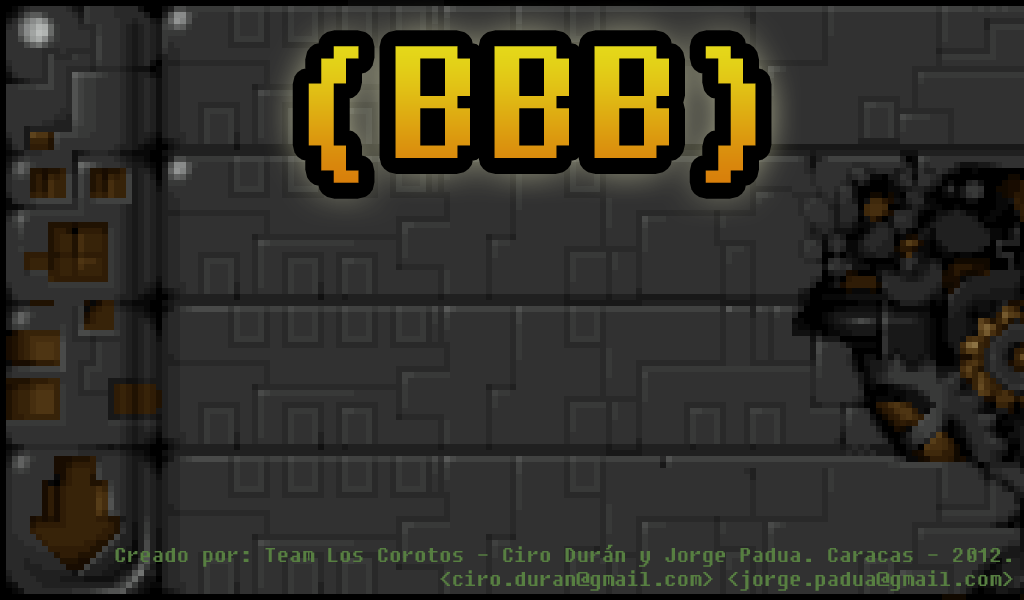
<style>
.page{position:relative;width:1024px;height:600px;background:#313131}
.page>*{position:absolute;margin:0}
.t1{font:159px "Fixedsys"}
.t2{font:20px "Fixedsys";color:#577f41}
</style>
<div class="page">
<p class="t1" style="left:308px;top:46px;width:448px;height:137px">(BBB)</p>
<p class="t2" style="left:115px;top:544px;width:898px;height:47px;text-align:right">Creado por: Team Los Corotos - Ciro Durán y Jorge Padua. Caracas - 2012.<br>&lt;ciro.duran@gmail.com&gt; &lt;jorge.padua@gmail.com&gt;</p>
</div>
